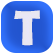
<style>
.page{position:relative;width:54px;height:54px}
.page>*{position:absolute;margin:0}
.t1{font:50px "BerlinSansFBDemi-Bold";color:#f4f0f0}
</style>
<div class="page">
<p class="t1" style="left:14px;top:10px;width:26px;height:36px;opacity:0.92">T</p>
</div>
